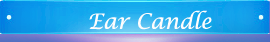
<style>
.page{position:relative;width:270px;height:42px}
.page>*{position:absolute;margin:0}
.t1{font:21px "LucidaCalligraphy-Italic";color:#fffcfc}
</style>
<div class="page">
<p class="t1" style="left:89px;top:10px;width:123px;height:20px">Ear Candle</p>
</div>
